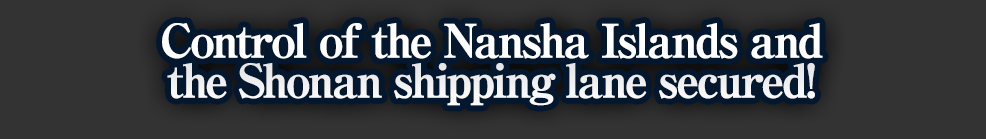
<style>
.page{position:relative;width:986px;height:139px;background:#333333}
.page>*{position:absolute;margin:0}
.t1{font:46px/40px "RyuminPro-ExBold";letter-spacing:-0.08em;color:#ffffff;font-weight:bold}
</style>
<div class="page">
<p class="t1" style="left:162px;top:23px;width:661px;height:83px;text-align:center">Control of the Nansha Islands and<br>the Shonan shipping lane secured!</p>
</div>
